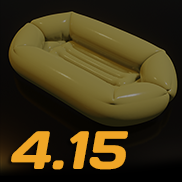
<style>
.page{position:relative;width:182px;height:182px}
.page>*{position:absolute;margin:0}
.t1{font:54px "DaysOne-Regular";color:#f0a626;font-style:italic}
</style>
<div class="page">
<p class="t1" style="left:11px;top:131px;width:117px;height:39px">4.15</p>
</div>
